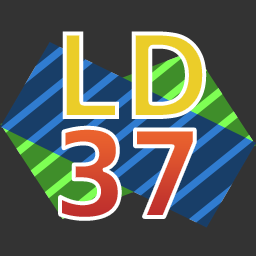
<style>
.page{position:relative;width:256px;height:256px;background:#333333}
.page>*{position:absolute;margin:0}
.t1{font:120px "DejaVuSansCondensed-Bold"}
</style>
<div class="page">
<p class="t1" style="left:62px;top:31px;width:145px;height:88px">LD</p>
<p class="t1" style="left:60px;top:127px;width:135px;height:92px">37</p>
</div>
